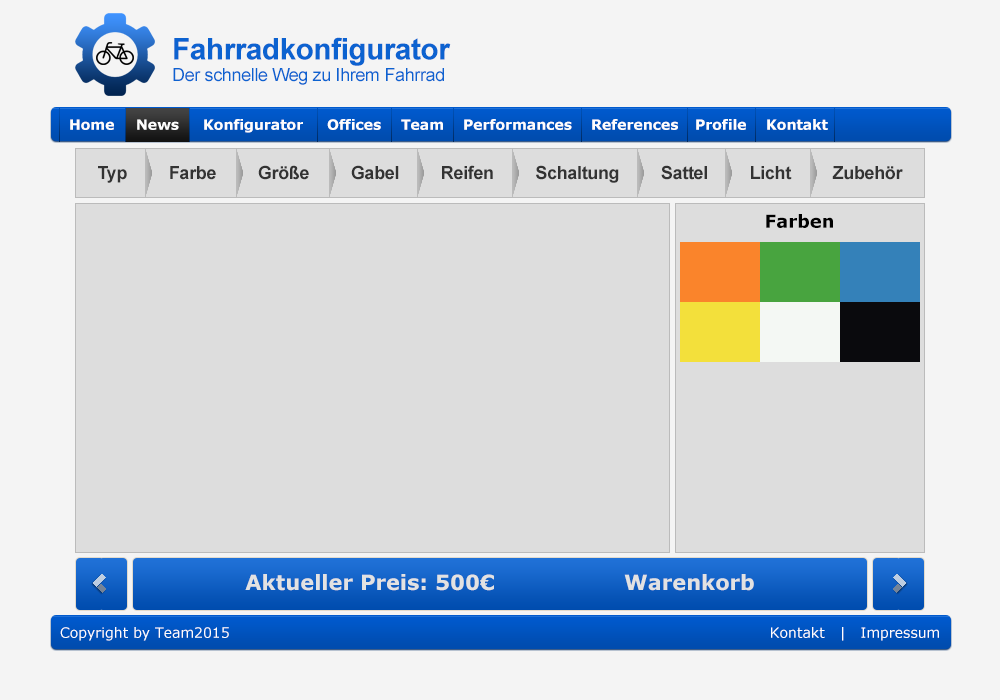
<style>
.page{position:relative;width:1000px;height:700px;background:#dddddd}
.page>*{position:absolute;margin:0}
.t1{font:18px "ArialMT";letter-spacing:-0.02em;color:#0c62d0}
.t2{font:30px "Arial-BoldMT";letter-spacing:-0.02em;color:#0c62d0}
.t3{font:14px "Verdana-Bold";color:#fefefe}
.t4{font:18px "Arial-BoldMT";letter-spacing:-0.02em;color:#333333}
.t5{font:18px "Verdana-Bold";color:#000000}
.t6{font:21px "Verdana-Bold";color:#e2e2e2}
.t7{font:14px "Verdana";color:#fefefe}
</style>
<div class="page">
<p class="t1" style="left:173px;top:37px;width:278px;height:48px"><span class="t2">Fahrradkonfigurator<br></span>Der schnelle Weg zu Ihrem Fahrrad</p>
<p class="t3" style="left:70px;top:119px;width:44px;height:11px">Home</p>
<p class="t3" style="left:137px;top:119px;width:42px;height:11px">News</p>
<p class="t3" style="left:204px;top:119px;width:99px;height:14px">Konfigurator</p>
<p class="t3" style="left:327px;top:119px;width:54px;height:11px">Offices</p>
<p class="t3" style="left:401px;top:119px;width:42px;height:11px">Team</p>
<p class="t3" style="left:464px;top:119px;width:108px;height:11px">Performances</p>
<p class="t3" style="left:592px;top:119px;width:86px;height:11px">References</p>
<p class="t3" style="left:696px;top:119px;width:50px;height:11px">Profile</p>
<p class="t3" style="left:767px;top:119px;width:61px;height:11px">Kontakt</p>
<p class="t4" style="left:98px;top:165px;width:805px;height:18px">Typ         Farbe         Größe         Gabel         Reifen         Schaltung         Sattel         Licht         Zubehör</p>
<p class="t5" style="left:766px;top:214px;width:67px;height:14px">Farben</p>
<p class="t6" style="left:245px;top:574px;width:509px;height:17px">Aktueller Preis: 500€                  Warenkorb</p>
<p class="t7" style="left:60px;top:627px;width:169px;height:14px">Copyright by Team2015</p>
<p class="t7" style="left:771px;top:627px;width:168px;height:14px">Kontakt   |   Impressum</p>
</div>
